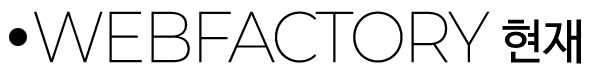
<style>
.page{position:relative;width:600px;height:80px;background:#ffffff}
.page>*{position:absolute;margin:0}
.t1{font:72px "Montserrat-ExtraLight";letter-spacing:-0.05em;color:#020202;text-transform:uppercase;scale:0.95 1}
.t2{font:48px "NanumBarunGothic";letter-spacing:-0.025em;color:#000000;text-transform:uppercase}
</style>
<div class="page">
<p class="t1" style="left:34px;top:11px;width:456px;height:52px">webfactory</p>
<p class="t2" style="left:502px;top:19px;width:79px;height:45px">현재</p>
</div>
